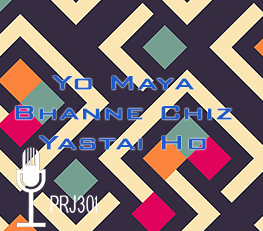
<style>
.page{position:relative;width:263px;height:231px;background:#352c41}
.page>*{position:absolute;margin:0}
.t1{font:25px "BankGothicBT-Light";letter-spacing:0.016em;color:#1d5bc9;font-weight:bold;scale:1.24 1}
</style>
<div class="page">
<p class="t1" style="left:15px;top:76px;width:217px;height:74px;text-align:center">Yo Maya Bhanne Chiz Yastai Ho</p>
</div>
